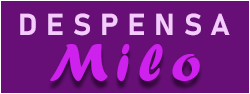
<style>
.page{position:relative;width:250px;height:94px;background:#670f77}
.page>*{position:absolute;margin:0}
.t1{font:30px "Bahnschrift-Bold";letter-spacing:0.3em;color:#f5cafd}
.t2{font:55px "ForteMT";letter-spacing:0.15em;color:#cf21ee}
</style>
<div class="page">
<p class="t1" style="left:20px;top:13px;width:210px;height:23px">DESPENSA</p>
<p class="t2" style="left:50px;top:44px;width:150px;height:37px">Milo</p>
</div>
